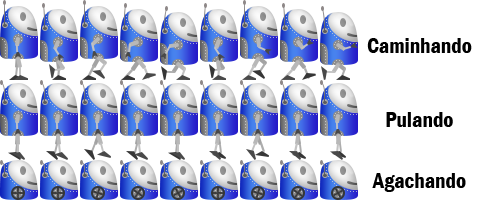
<style>
.page{position:relative;width:488px;height:200px;background:#ffffff}
.page>*{position:absolute;margin:0}
.t1{font:21.8px "FranklinGothic-DemiCond";color:#000000}
</style>
<div class="page">
<p class="t1" style="left:367px;top:38px;width:105px;height:15px">Caminhando</p>
<p class="t1" style="left:386px;top:112px;width:67px;height:15px">Pulando</p>
<p class="t1" style="left:372px;top:173px;width:94px;height:19px">Agachando</p>
</div>
